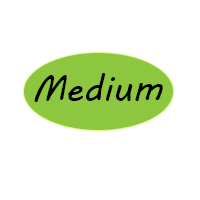
<style>
.page{position:relative;width:200px;height:200px;background:#ffffff}
.page>*{position:absolute;margin:0}
.t1{font:36px "MVBoli";color:#000000}
</style>
<div class="page">
<p class="t1" style="left:34px;top:73px;width:129px;height:29px">Medium</p>
</div>
